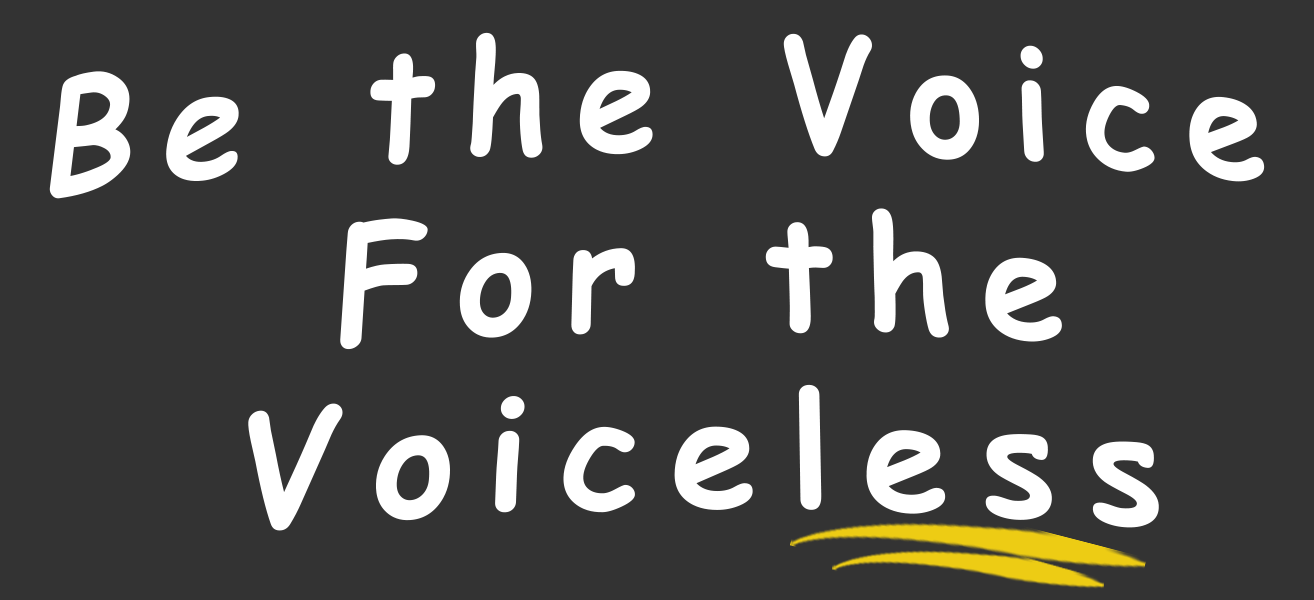
<style>
.page{position:relative;width:1314px;height:600px;background:#333333}
.page>*{position:absolute;margin:0}
.t1{font:157.5px "ComicSansMS-Bold";letter-spacing:0.2em;color:#ffffff;scale:0.95 1}
</style>
<div class="page">
<p class="t1" style="left:49px;top:32px;width:1216px;height:499px;text-align:center">Be the Voice <br>For the<br>Voiceless</p>
</div>
